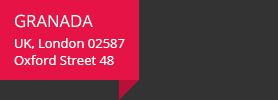
<style>
.page{position:relative;width:278px;height:100px;background:#333333}
.page>*{position:absolute;margin:0}
.t1{font:16.6px "OpenSans";color:#ffffff;text-transform:uppercase}
.t2{font:13px "OpenSans";color:#ffffff}
.t3{font:13px/17px "OpenSans";color:#ffffff}
</style>
<div class="page">
<p class="t1" style="left:15px;top:14px;width:78px;height:14px">Granada<span class="t2"></span></p>
<p class="t3" style="left:14px;top:38px;width:111px;height:27px">UK, London 02587<br>Oxford Street 48</p>
</div>
